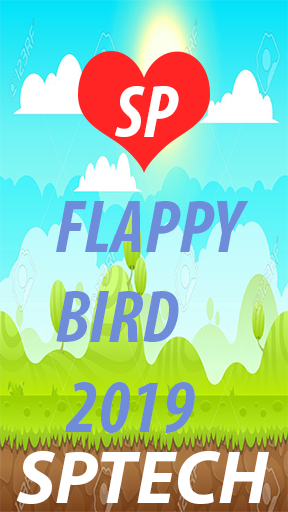
<style>
.page{position:relative;width:288px;height:512px}
.page>*{position:absolute;margin:0}
.t1{font:75px "MyriadPro-BoldCondIt";color:#ffffff}
.t2{font:75px "MyriadPro-BoldCondIt";color:#6e8cd9}
.t3{font:75px "MyriadPro-BoldIt";color:#ffffff}
</style>
<div class="page">
<p class="t1" style="left:115px;top:86px;width:64px;height:51px">SP</p>
<p class="t2" style="left:56px;top:201px;width:193px;height:232px">FLAPPY <br>BIRD<br> 2019</p>
<p class="t3" style="left:16px;top:451px;width:253px;height:53px">SPTECH</p>
</div>
